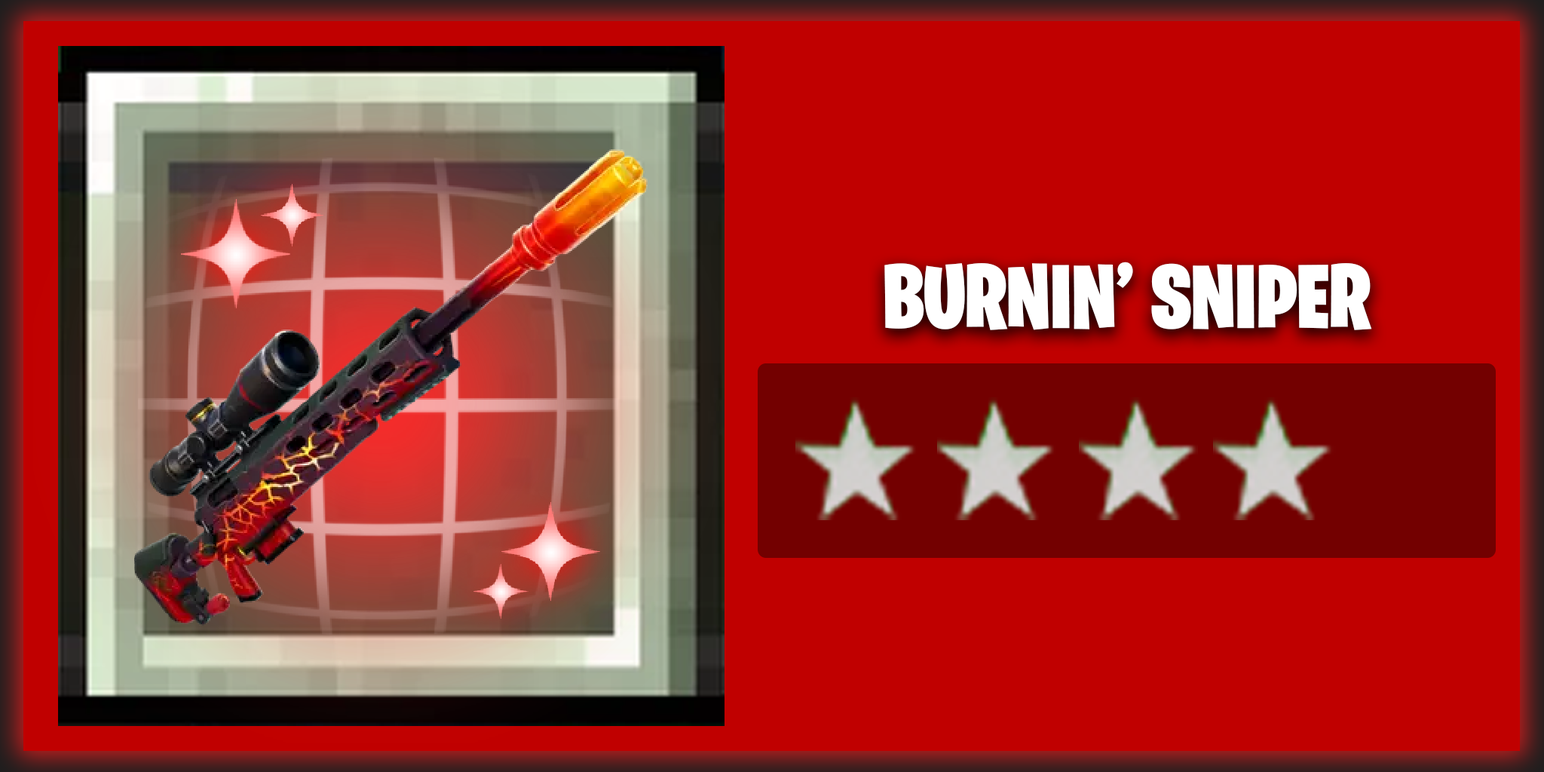
<style>
.page{position:relative;width:1544px;height:772px;background:#c00000}
.page>*{position:absolute;margin:0}
.t1{font:90.5px "BurbankBigCondensed-Black";color:#ffffff}
</style>
<div class="page">
<p class="t1" style="left:885px;top:262px;width:487px;height:68px">BURNIN’ SNIPER</p>
</div>
